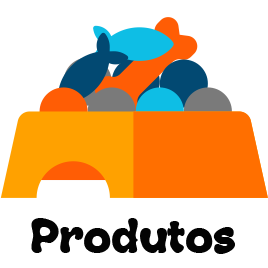
<style>
.page{position:relative;width:268px;height:268px;background:#ffffff}
.page>*{position:absolute;margin:0}
.t1{font:41.7px "Kush-Fat";color:#030303}
</style>
<div class="page">
<p class="t1" style="left:31px;top:218px;width:204px;height:36px">Produtos</p>
</div>
